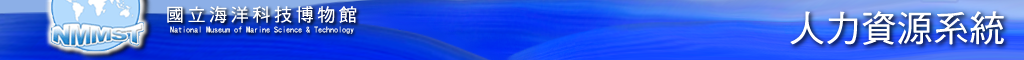
<style>
.page{position:relative;width:1024px;height:60px}
.page>*{position:absolute;margin:0}
.t1{font:18px "DFHei-Md-HK-BF";letter-spacing:0.2em;color:#ffffff}
.t2{font:36px "DFHei-Md-HK-BF";color:#ffffff}
.t3{font:8px "DFHei-Md-HK-BF";color:#ffffff}
</style>
<div class="page">
<p class="t1" style="left:167px;top:6px;width:190px;height:17px">國立海洋科技博物館</p>
<p class="t2" style="left:790px;top:11px;width:214px;height:34px">人力資源系統</p>
<p class="t3" style="left:170px;top:26px;width:184px;height:8px">National Museum of Marine Science &amp; Technology</p>
</div>
